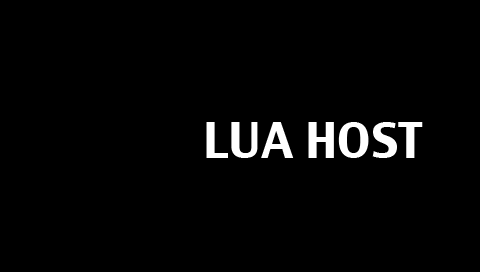
<style>
.page{position:relative;width:480px;height:272px;background:#000000}
.page>*{position:absolute;margin:0}
.t1{font:48px "CharcoalCY";color:#ffffff;text-transform:uppercase}
</style>
<div class="page">
<p class="t1" style="left:206px;top:122px;width:217px;height:36px">LUA HOST</p>
</div>
